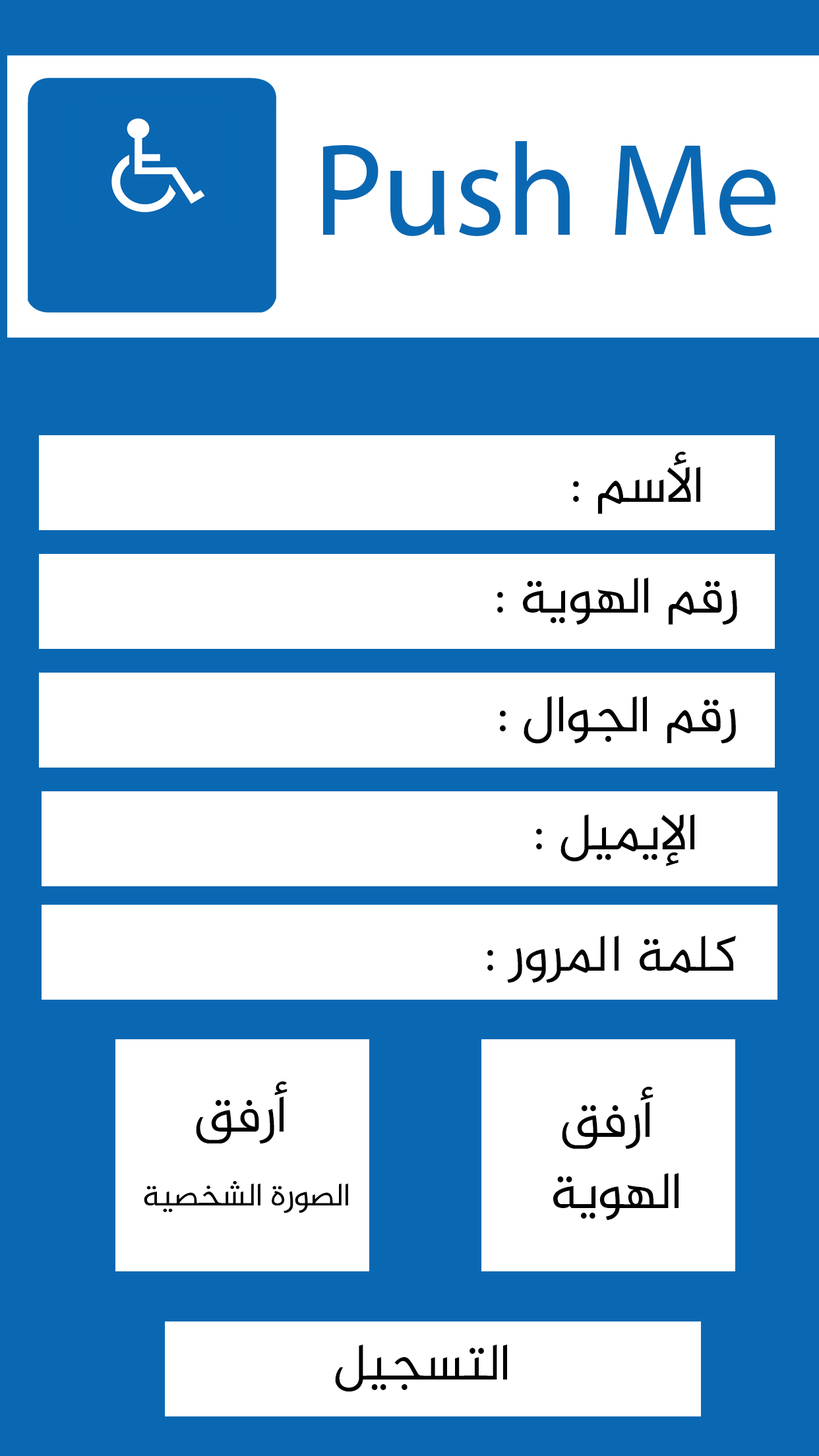
<style>
.page{position:relative;width:819px;height:1456px;background:#ffffff}
.page>*{position:absolute;margin:0}
.t1{font:131.9px "MyriadPro-Regular";color:#0a68b2}
.t2{font:52.8px "Al-Jazeera-Arabic-Regular";color:#000000}
</style>
<div class="page">
<p class="t1" style="left:323px;top:141px;width:452px;height:95px">Push Me</p>
<p class="t2" style="left:573px;top:452px;width:127px;height:62px">الأسم :</p>
<p class="t2" style="left:497px;top:578px;width:240px;height:47px">رقم الهوية :</p>
<p class="t2" style="left:536px;top:814px;width:158px;height:52px">الإيميل :</p>
<p class="t2" style="left:487px;top:936px;width:250px;height:47px">كلمة المرور :</p>
<p class="t2" style="left:196px;top:1081px;width:92px;height:63px">أرفق</p>
<p class="t2" style="left:562px;top:1087px;width:91px;height:62px">أرفق</p>
<p class="t2" style="left:553px;top:1173px;width:126px;height:47px">الهوية</p>
<p class="t2" style="left:335px;top:1345px;width:172px;height:47px">التسجيل</p>
</div>
